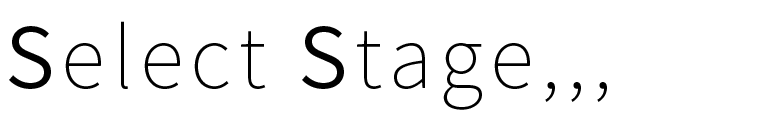
<style>
.page{position:relative;width:780px;height:120px;background:#ffffff}
.page>*{position:absolute;margin:0}
.t1{font:83.3px "SourceHanSansJP-ExtraLight";letter-spacing:0.08em;color:#000000}
.t2{font:83.3px "SourceHanSansJP-Normal";letter-spacing:0.08em;color:#000000}
</style>
<div class="page">
<p class="t1" style="left:9px;top:21px;width:598px;height:89px"><span class="t2">S</span>elect <span class="t2">S</span>tage,,,</p>
</div>
